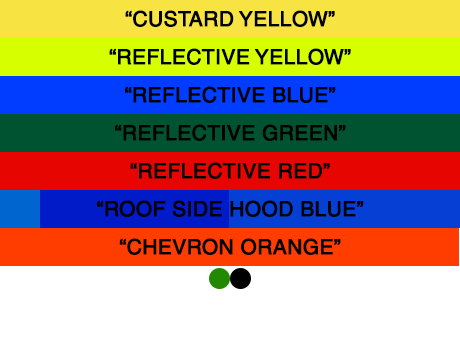
<style>
.page{position:relative;width:460px;height:340px;background:#ffffff}
.page>*{position:absolute;margin:0}
.t1{font:20.8px "Helvetica";color:#000000;font-weight:bold}
</style>
<div class="page">
<p class="t1" style="left:125px;top:10px;width:210px;height:17px">“CUSTARD YELLOW”</p>
<p class="t1" style="left:109px;top:48px;width:242px;height:17px">“REFLECTIVE YELLOW”</p>
<p class="t1" style="left:125px;top:86px;width:211px;height:17px">“REFLECTIVE BLUE”</p>
<p class="t1" style="left:115px;top:124px;width:231px;height:17px">“REFLECTIVE GREEN”</p>
<p class="t1" style="left:130px;top:162px;width:200px;height:17px">“REFLECTIVE RED”</p>
<p class="t1" style="left:97px;top:200px;width:267px;height:17px">“ROOF SIDE HOOD BLUE”</p>
<p class="t1" style="left:119px;top:238px;width:222px;height:17px">“CHEVRON ORANGE”</p>
</div>
